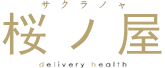
<style>
.page{position:relative;width:165px;height:68px;background:#ffffff}
.page>*{position:absolute;margin:0}
.t1{font:10px "NSimSun";letter-spacing:0.9em;color:#aa976f}
.t2{font:48px "SimHei";letter-spacing:0.2em;color:#b8a470}
</style>
<div class="page">
<p class="t1" style="left:41px;top:0px;width:84px;height:9px">サクラノャ</p>
<p class="t2" style="left:2px;top:12px;width:160px;height:43px">桜ノ屋</p>
</div>
